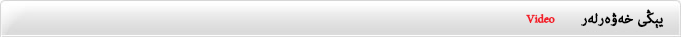
<style>
.page{position:relative;width:681px;height:37px}
.page>*{position:absolute;margin:0}
.t1{font:16px "AdobeArabic-Regular";letter-spacing:-0.02em;color:#f2202b;font-weight:bold}
.t2{font:19.2px "AdobeArabic-Regular";color:#020202;font-weight:bold}
</style>
<div class="page">
<p class="t1" style="left:526px;top:14px;width:29px;height:9px">Video</p>
<p class="t2" style="left:581px;top:9px;width:83px;height:20px">يېڭى خەۋەرلەر</p>
</div>
